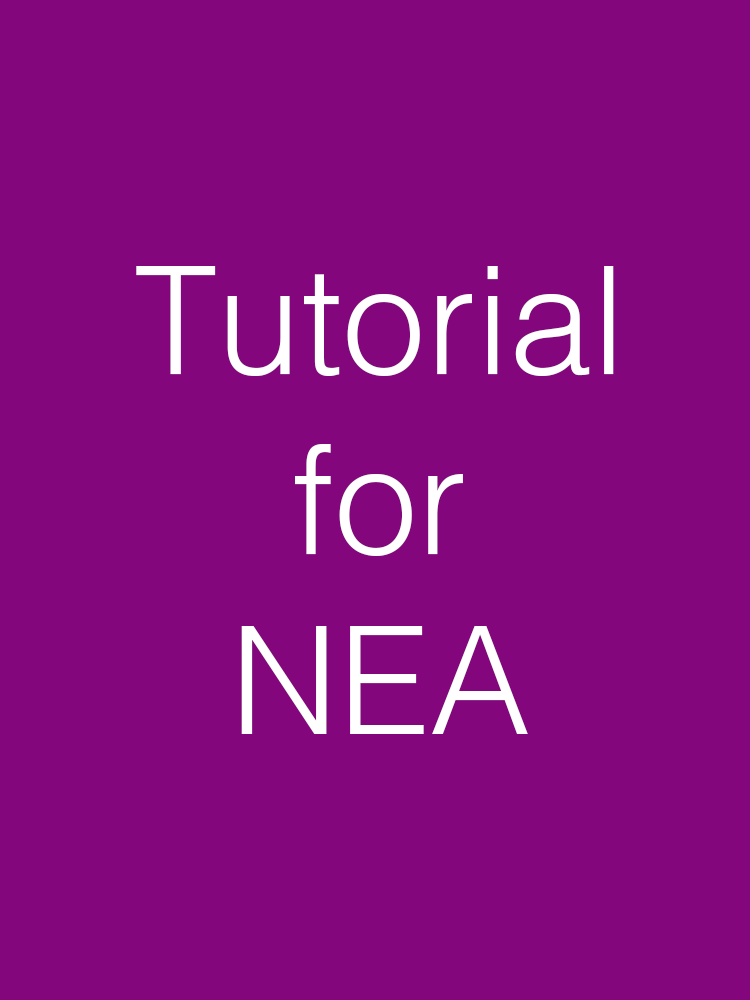
<style>
.page{position:relative;width:750px;height:1000px;background:#84067d}
.page>*{position:absolute;margin:0}
.t1{font:150px "Helvetica-Light";color:#ffffff}
</style>
<div class="page">
<p class="t1" style="left:136px;top:266px;width:478px;height:468px;text-align:center">Tutorial<br>for<br>NEA</p>
</div>
